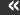
<style>
.page{position:relative;width:20px;height:15px;background:#333333}
.page>*{position:absolute;margin:0}
.t1{font:12px "Seoul-Headline";color:#ffffff}
</style>
<div class="page">
<p class="t1" style="left:8px;top:0px;width:6px;height:11px">&lt;</p>
<p class="t1" style="left:13px;top:0px;width:6px;height:11px">&lt;</p>
</div>
